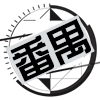
<style>
.page{position:relative;width:100px;height:100px;background:#ffffff}
.page>*{position:absolute;margin:0}
.t1{font:40px "HYk1gj";color:#000000}
</style>
<div class="page">
<p class="t1" style="left:10px;top:18px;width:81px;height:64px;rotate:-25deg">番禺</p>
</div>
